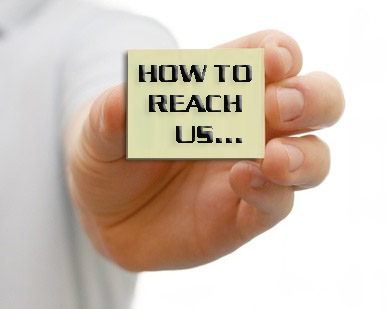
<style>
.page{position:relative;width:389px;height:309px;background:#ffffff}
.page>*{position:absolute;margin:0}
.t1{font:25.3px "SerpentineD-Bold"}
</style>
<div class="page">
<p class="t1" style="left:139px;top:65px;width:113px;height:78px;text-align:center">HOW TO <br>REACH <br>    US...</p>
</div>
